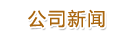
<style>
.page{position:relative;width:128px;height:35px;background:#ffffff}
.page>*{position:absolute;margin:0}
.t1{font:18px "MicrosoftYaHei";letter-spacing:0.1em;color:#a9650d}
</style>
<div class="page">
<p class="t1" style="left:28px;top:9px;width:77px;height:19px">公司新闻</p>
</div>
